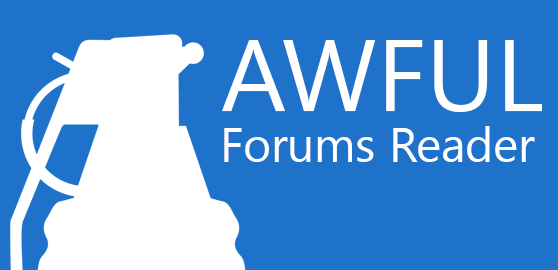
<style>
.page{position:relative;width:558px;height:270px;background:#1e72c9}
.page>*{position:absolute;margin:0}
.t1{font:101.2px "SegoeUI";color:#ffffff}
.t2{font:47.6px "SegoeUI";color:#ffffff}
</style>
<div class="page">
<p class="t1" style="left:222px;top:40px;width:320px;height:72px">AWFUL</p>
<p class="t2" style="left:224px;top:126px;width:311px;height:36px">Forums Reader</p>
</div>
